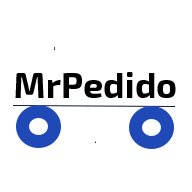
<style>
.page{position:relative;width:192px;height:192px;background:#ffffff}
.page>*{position:absolute;margin:0}
.t1{font:36px "Exo2.0-Bold";color:#000001}
</style>
<div class="page">
<p class="t1" style="left:15px;top:72px;width:161px;height:26px">MrPedido</p>
</div>
